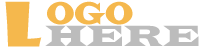
<style>
.page{position:relative;width:200px;height:50px;background:#ffffff}
.page>*{position:absolute;margin:0}
.t1{font:59.8px "ShowcardGothic-Reg";color:#f5b84d;text-transform:uppercase;scale:1.19 1}
.t2{font:31.5px "LatinWide";color:#f5b84d;text-transform:uppercase;scale:0.67 1}
.t3{font:30.2px "LatinWide";color:#bcbcbc;text-transform:uppercase;scale:0.87 1}
</style>
<div class="page">
<p class="t1" style="left:5px;top:1px;width:37px;height:46px">L</p>
<p class="t2" style="left:47px;top:1px;width:86px;height:24px">ogo</p>
<p class="t3" style="left:45px;top:25px;width:154px;height:21px">here</p>
</div>
